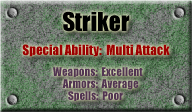
<style>
.page{position:relative;width:192px;height:112px}
.page>*{position:absolute;margin:0}
.t1{font:24px "Impact";color:#000000}
.t2{font:13px "Impact";color:#9c0000}
.t3{font:11px "Impact";color:#513451}
</style>
<div class="page">
<p class="t1" style="left:63px;top:11px;width:67px;height:21px">Striker</p>
<p class="t2" style="left:22px;top:44px;width:148px;height:13px">Special Ability:  Multi Attack</p>
<p class="t3" style="left:53px;top:67px;width:90px;height:10px">Weapons:  Excellent</p>
<p class="t3" style="left:62px;top:79px;width:77px;height:11px">Armors:  Average</p>
<p class="t3" style="left:68px;top:91px;width:55px;height:10px">Spells:  Poor</p>
</div>
